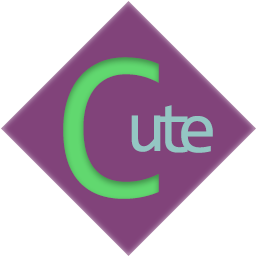
<style>
.page{position:relative;width:256px;height:256px;background:#ffffff}
.page>*{position:absolute;margin:0}
.t1{font:216px "Consolas";color:#61d86f}
.t2{font:72px "Consolas";color:#94c6c3}
</style>
<div class="page">
<p class="t1" style="left:63px;top:57px;width:96px;height:142px">C</p>
<p class="t2" style="left:155px;top:105px;width:33px;height:48px">t</p>
<p class="t2" style="left:131px;top:115px;width:30px;height:37px">u</p>
<p class="t2" style="left:181px;top:116px;width:32px;height:37px">e</p>
</div>
